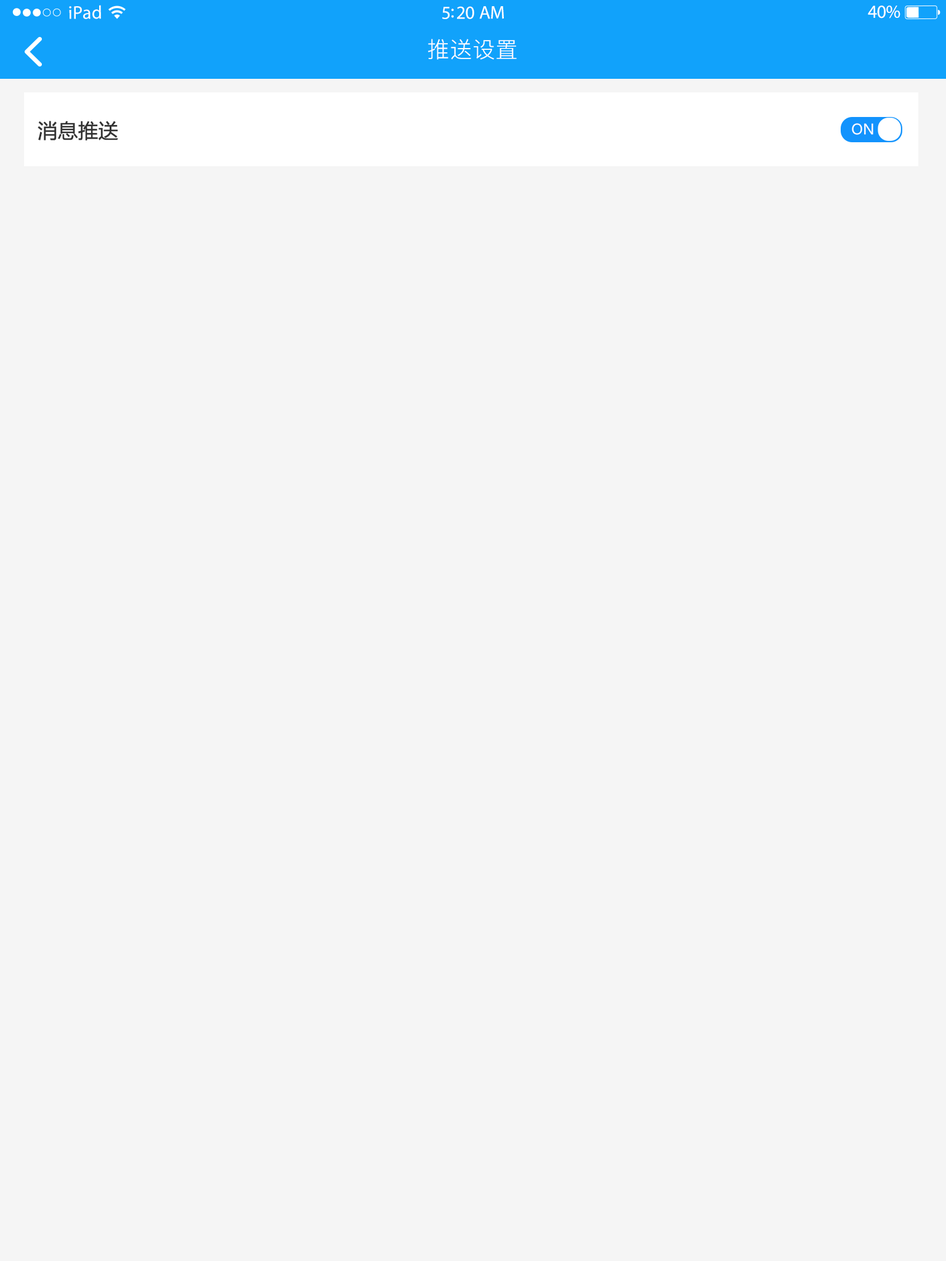
<style>
.page{position:relative;width:946px;height:1261px;background:#f5f5f5}
.page>*{position:absolute;margin:0}
.t1{font:18.5px "MyriadPro-Regular";letter-spacing:0.02em;color:#ffffff}
.t2{font:18.5px "MyriadPro-Regular";letter-spacing:-0.02em;color:#ffffff}
.t3{font:22.2px "PingFang-SC-Regular";letter-spacing:0.03em;color:#ffffff}
.t4{font:19.7px "MicrosoftYaHei";color:#333333;font-weight:bold}
.t5{font:14.2px "MicrosoftYaHei";color:#ffffff}
</style>
<div class="page">
<p class="t1" style="left:69px;top:5px;width:32px;height:14px">iPad</p>
<p class="t2" style="left:867px;top:6px;width:33px;height:12px">40%</p>
<p class="t2" style="left:442px;top:6px;width:62px;height:13px">5:20 AM</p>
<p class="t3" style="left:428px;top:39px;width:89px;height:21px">推送设置</p>
<p class="t4" style="left:38px;top:121px;width:80px;height:19px">消息推送</p>
<p class="t5" style="left:851px;top:123px;width:22px;height:12px">ON</p>
</div>
